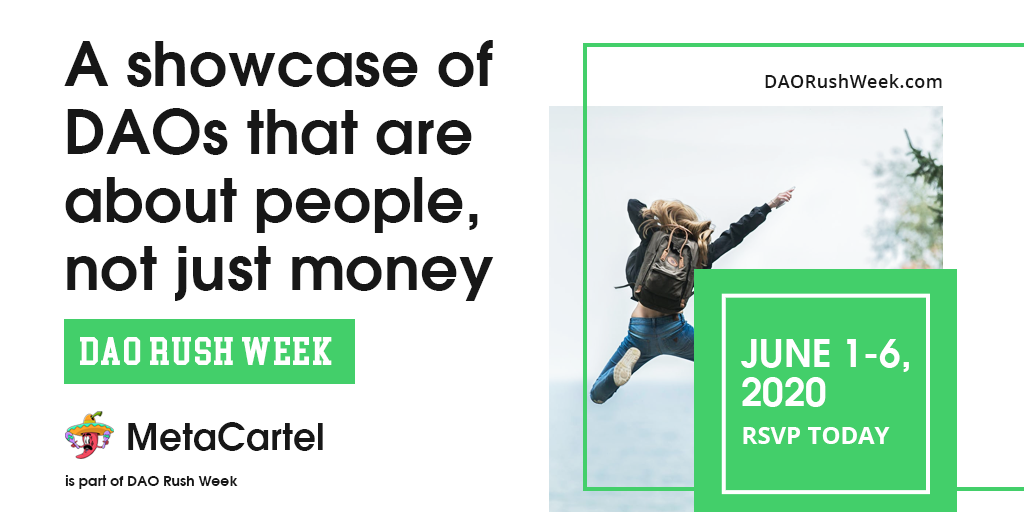
<style>
.page{position:relative;width:1024px;height:512px;background:#ffffff}
.page>*{position:absolute;margin:0}
.t1{font:60px/68px "AvantGarde-Demi";letter-spacing:0.005em;color:#171717}
.t2{font:18px "OpenSans-SemiBold";letter-spacing:0.025em;color:#171717}
.t3{font:36px "CollegeBlock";letter-spacing:0.025em;color:#ffffff}
.t4{font:38px/39px "AvantGarde-Demi";color:#ffffff;text-transform:uppercase}
.t5{font:36px "AvantGarde-Demi";letter-spacing:0.01em;color:#171717}
.t6{font:24px "OpenSans-Bold";color:#ffffff;text-transform:uppercase}
.t7{font:14px "AvantGarde-Demi";letter-spacing:0.005em;color:#171717}
</style>
<div class="page">
<p class="t1" style="left:64px;top:40px;width:430px;height:261px">A showcase of DAOs that are about people, not just money</p>
<p class="t2" style="left:765px;top:74px;width:177px;height:14px">DAORushWeek.com</p>
<p class="t2" style="left:765px;top:74px;width:177px;height:14px">DAORushWeek.com</p>
<p class="t3" style="left:80px;top:337px;width:252px;height:28px">DAO Rush Week</p>
<p class="t4" style="left:741px;top:339px;width:168px;height:68px">June 1-6,<br>2020</p>
<p class="t4" style="left:741px;top:339px;width:168px;height:68px">June 1-6,<br>2020</p>
<p class="t5" style="left:128px;top:422px;width:195px;height:29px">MetaCartel</p>
<p class="t6" style="left:743px;top:427px;width:147px;height:17px">RSVP Today</p>
<p class="t6" style="left:743px;top:427px;width:147px;height:17px">RSVP Today</p>
<p class="t7" style="left:65px;top:475px;width:173px;height:14px">is part of DAO Rush Week</p>
</div>
